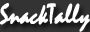
<style>
.page{position:relative;width:90px;height:32px;background:#333333}
.page>*{position:absolute;margin:0}
.t1{font:27.8px "Mistral";color:#ffffff;font-weight:bold;scale:0.85 1}
</style>
<div class="page">
<p class="t1" style="left:0px;top:3px;width:90px;height:29px">SnackTally</p>
</div>
